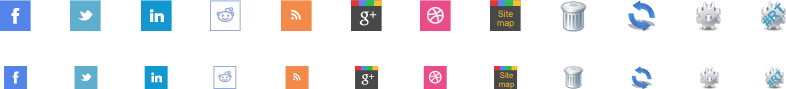
<style>
.page{position:relative;width:786px;height:89px;background:#ffffff}
.page>*{position:absolute;margin:0}
.t1{font:14px "Arial-BoldMT";color:#3fa1c6}
.t2{font:9px/9px "ArialMT"}
.t3{font:8px/9px "ArialMT"}
.t4{font:10px "Arial-BoldMT";color:#3fa1c6}
</style>
<div class="page">
<p class="t1" style="left:762px;top:3px;width:23px;height:25px;rotate:-45deg">#RT</p>
<p class="t2" style="left:497px;top:10px;width:17px;height:18px;text-align:center">Site<br>map</p>
<p class="t3" style="left:499px;top:72px;width:15px;height:17px;text-align:center">Site<br>map</p>
<p class="t4" style="left:767px;top:69px;width:16px;height:19px;rotate:-45deg">#RT</p>
</div>
